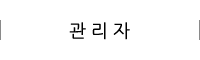
<style>
.page{position:relative;width:200px;height:60px;background:#ffffff}
.page>*{position:absolute;margin:0}
.t1{font:18px "NanumGothic";color:#000000}
</style>
<div class="page">
<p class="t1" style="left:69px;top:22px;width:61px;height:18px">관 리 자</p>
</div>
